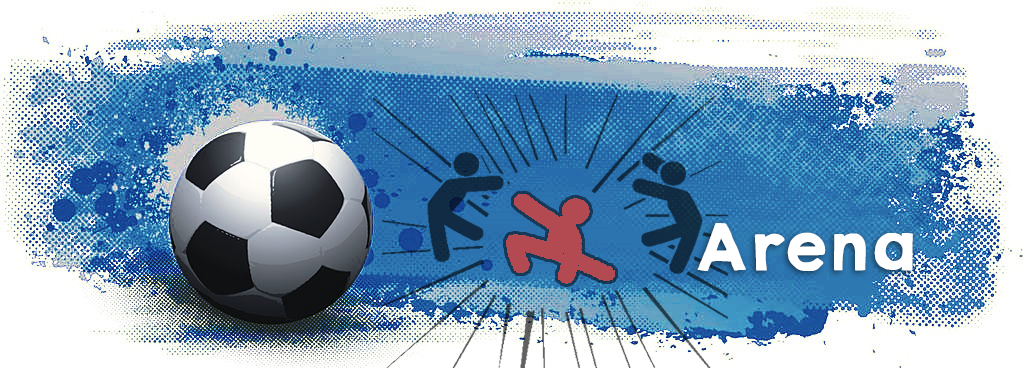
<style>
.page{position:relative;width:1023px;height:368px}
.page>*{position:absolute;margin:0}
.t1{font:58.3px "KGHAPPYSolid";color:#ffffff}
</style>
<div class="page">
<p class="t1" style="left:697px;top:223px;width:216px;height:48px">Arena</p>
</div>
